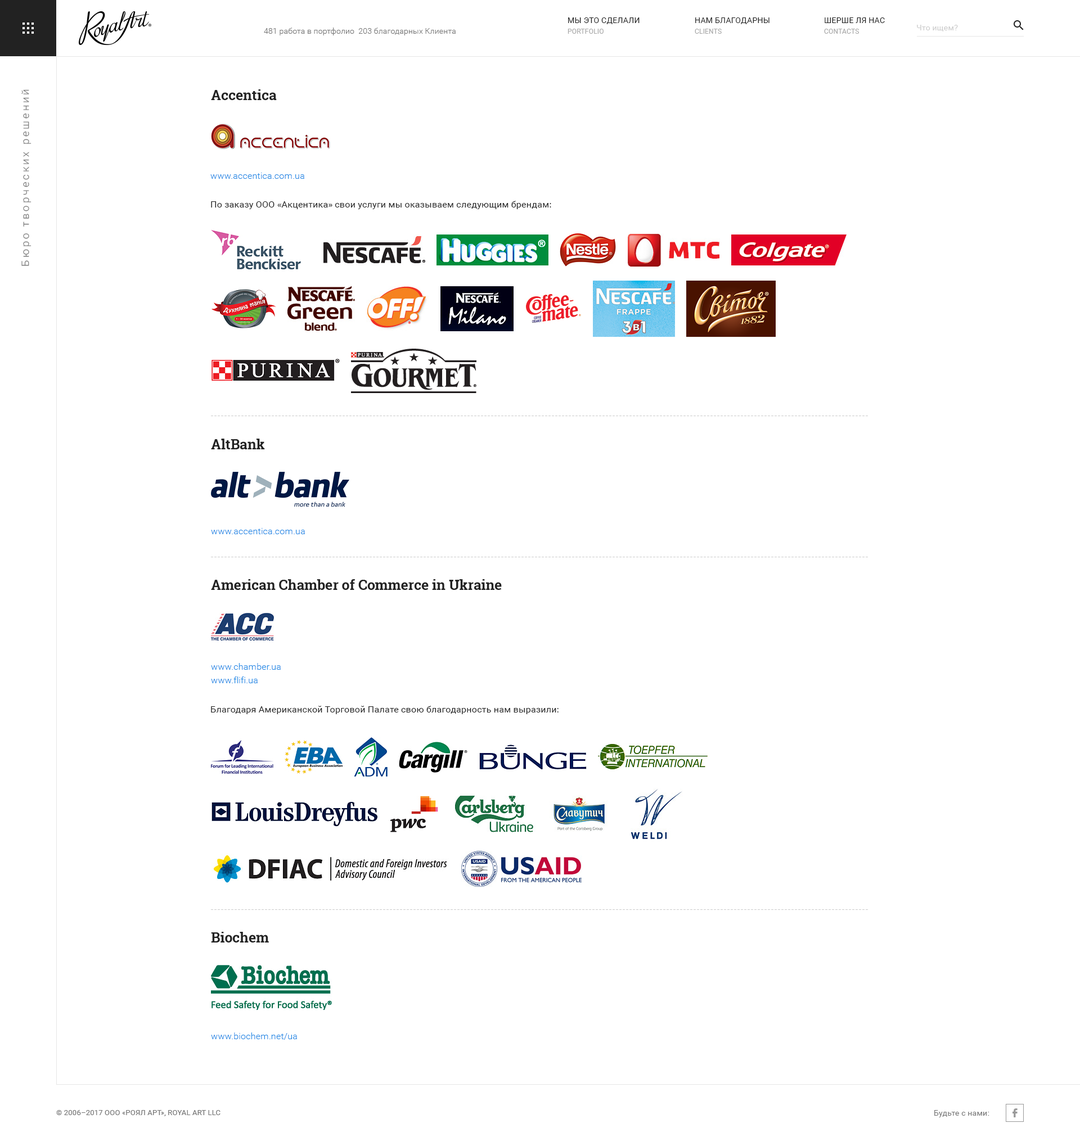
<style>
.page{position:relative;width:1080px;height:1141px;background:#ffffff}
.page>*{position:absolute;margin:0}
.t1{font:7.9px "Roboto-Regular";color:#222222;scale:1.03 1}
.t2{font:7.9px "Roboto-Light";color:#757575;scale:1.03 1}
.t3{font:6.8px "Roboto-Regular";color:#a9a9a9;scale:1.03 1}
.t4{font:7.9px "Roboto-Regular";color:#cccccc;scale:1.03 1}
.t5{font:10.1px "Roboto-Light";letter-spacing:0.2em;color:#757575;scale:1.05 1}
.t6{font:13.5px "RobotoSlab-Bold";color:#222222;scale:1.03 1}
.t7{font:9px "Roboto-Light";color:#1e88e5;scale:1.03 1}
.t8{font:9px "Roboto-Regular";color:#222222;scale:1.03 1}
.t9{font:9px/13.5px "Roboto-Light";color:#1e88e5;scale:1.03 1}
.t10{font:7.3px "Roboto-Regular";color:#757575;scale:1.03 1}
.t11{font:7.9px "Roboto-Regular";color:#757575;scale:1.03 1}
</style>
<div class="page">
<p class="t1" style="left:568px;top:17px;width:72px;height:7px">МЫ ЭТО СДЕЛАЛИ</p>
<p class="t1" style="left:695px;top:17px;width:75px;height:7px">НАМ БЛАГОДАРНЫ</p>
<p class="t1" style="left:825px;top:17px;width:60px;height:6px">ШЕРШЕ ЛЯ НАС</p>
<p class="t2" style="left:264px;top:28px;width:192px;height:7px">481 работа в портфолио  203 благодарных Клиента</p>
<p class="t3" style="left:568px;top:29px;width:36px;height:5px">PORTFOLIO</p>
<p class="t3" style="left:695px;top:29px;width:27px;height:5px">CLIENTS</p>
<p class="t3" style="left:824px;top:29px;width:35px;height:5px">CONTACTS</p>
<p class="t4" style="left:917px;top:25px;width:41px;height:7px">Что ищем?</p>
<p class="t5" style="left:21px;top:89px;width:11px;height:177px;rotate:-90deg">Бюро творческих решений</p>
<p class="t6" style="left:211px;top:89px;width:66px;height:11px">Accentica</p>
<p class="t7" style="left:210px;top:173px;width:94px;height:6px">www.accentica.com.ua</p>
<p class="t8" style="left:211px;top:201px;width:340px;height:8px">По заказу ООО «Акцентика» свои услуги мы оказываем следующим брендам:</p>
<p class="t6" style="left:211px;top:439px;width:54px;height:10px">AltBank</p>
<p class="t7" style="left:211px;top:528px;width:94px;height:6px">www.accentica.com.ua</p>
<p class="t6" style="left:211px;top:579px;width:291px;height:11px">American Chamber of Commerce in Ukraine</p>
<p class="t9" style="left:211px;top:663px;width:70px;height:20px">www.chamber.ua<br>www.flifi.ua</p>
<p class="t8" style="left:211px;top:706px;width:348px;height:8px">Благодаря Американской Торговой Палате свою благодарность нам выразили:</p>
<p class="t6" style="left:211px;top:932px;width:58px;height:11px">Biochem</p>
<p class="t7" style="left:211px;top:1033px;width:86px;height:7px">www.biochem.net/ua</p>
<p class="t10" style="left:56px;top:1110px;width:164px;height:7px">© 2006–2017 ООО «РОЯЛ АРТ», ROYAL ART LLC</p>
<p class="t11" style="left:934px;top:1110px;width:55px;height:8px">Будьте с нами:</p>
</div>
